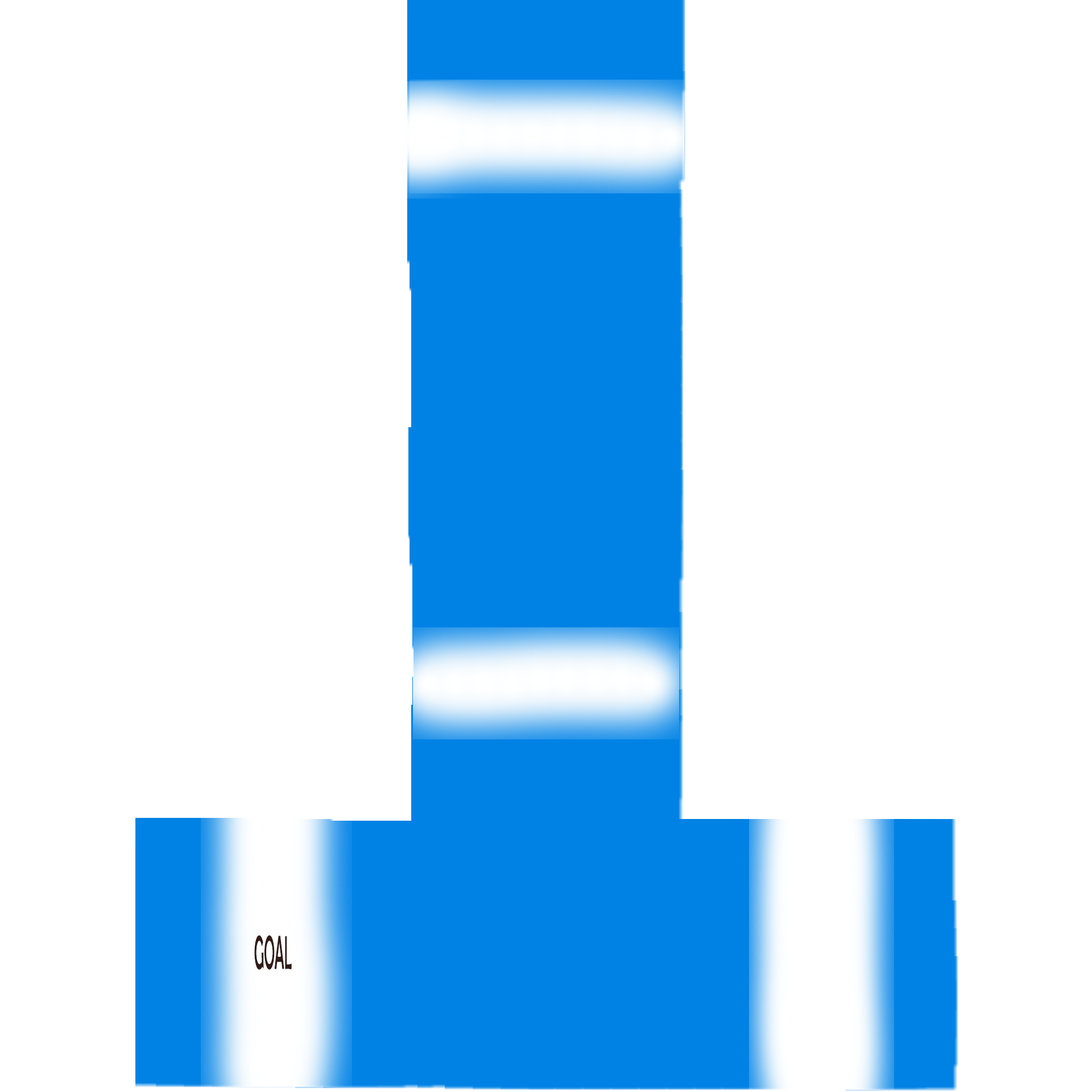
<style>
.page{position:relative;width:1092px;height:1092px;background:#ffffff}
.page>*{position:absolute;margin:0}
.t1{font:47.9px "BerlinSansFB-Reg";color:#2f1b17;scale:0.31 1}
</style>
<div class="page">
<p class="t1" style="left:254px;top:935px;width:38px;height:35px">GOAL</p>
</div>
